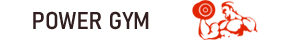
<style>
.page{position:relative;width:300px;height:40px;background:#ffffff}
.page>*{position:absolute;margin:0}
.t1{font:24px "Bahnschrift_444wght_86wdth";color:#311e1e;scale:1.07 1}
</style>
<div class="page">
<p class="t1" style="left:33px;top:11px;width:116px;height:19px">POWER GYM</p>
</div>
